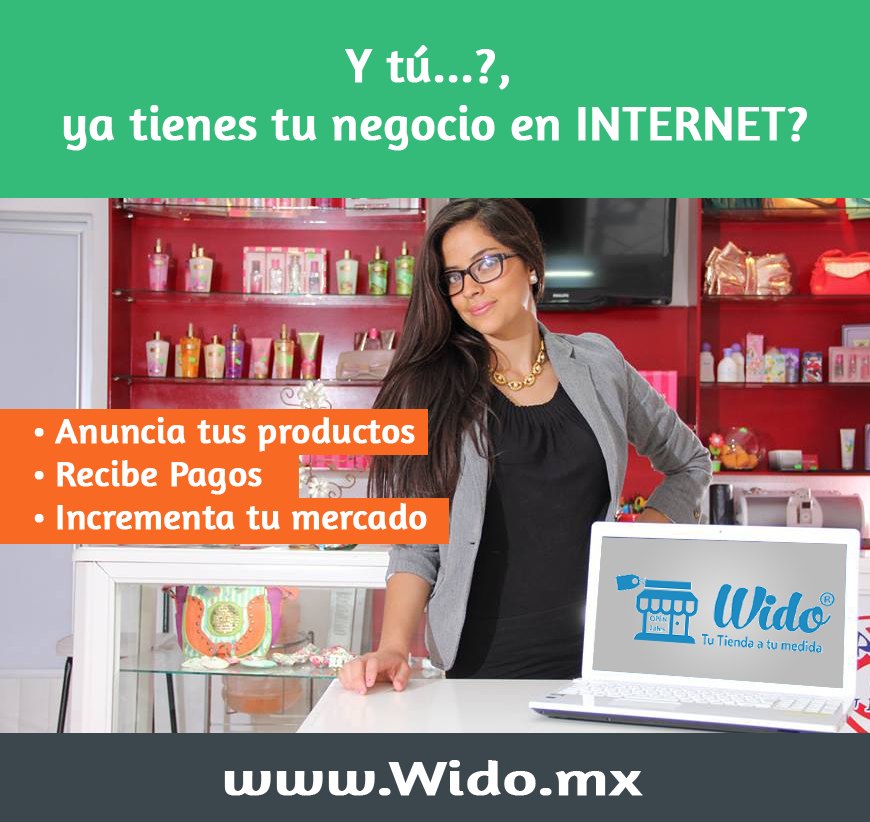
<style>
.page{position:relative;width:870px;height:822px;background:#35bb79}
.page>*{position:absolute;margin:0}
.t1{font:48px "Amaranth";color:#ffffff;font-weight:bold}
.t2{font:36px "Amaranth";color:#ffffff;font-weight:bold}
.t3{font:48px "Amaranth";color:#ffffff;font-weight:bold;scale:1.37 1}
</style>
<div class="page">
<p class="t1" style="left:63px;top:45px;width:744px;height:106px;text-align:center">Y tú...?,<br> ya tienes tu negocio en INTERNET?</p>
<p class="t2" style="left:34px;top:417px;width:393px;height:113px">• Anuncia tus productos<br>• Recibe Pagos<br>• Incrementa tu mercado</p>
<p class="t3" style="left:224px;top:760px;width:419px;height:36px">www.Wido.mx</p>
</div>
